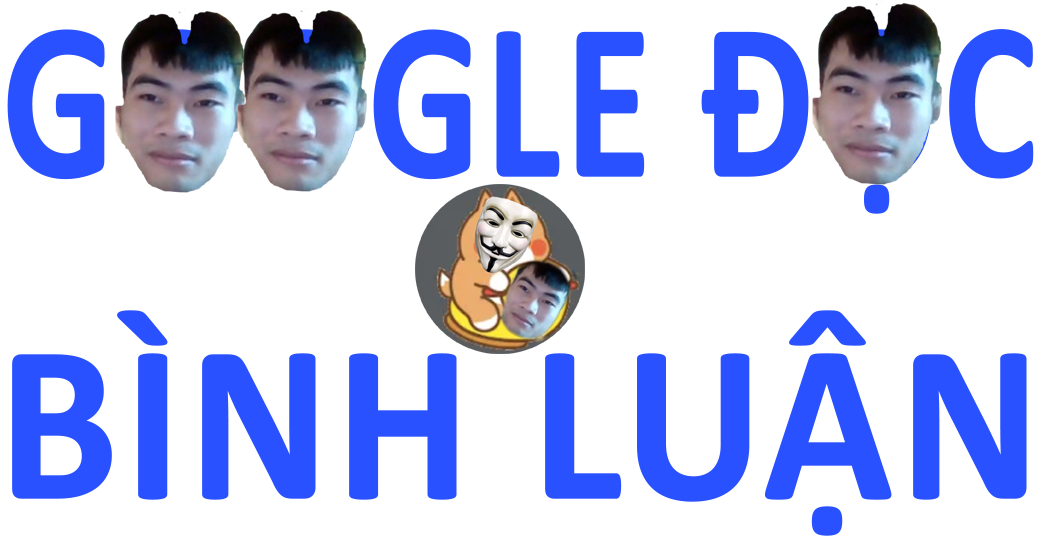
<style>
.page{position:relative;width:1039px;height:538px;background:#ffffff}
.page>*{position:absolute;margin:0}
.t1{font:227.5px "Calibri-Bold";color:#2951ff;text-transform:uppercase;font-weight:bold;scale:0.78 1}
.t2{font:227.3px "Calibri-Bold";color:#2951ff;text-transform:uppercase;font-weight:bold;scale:0.95 1}
</style>
<div class="page">
<p class="t1" style="left:7px;top:29px;width:1027px;height:185px">GOOGLE ĐỌC</p>
<p class="t2" style="left:12px;top:310px;width:1015px;height:226px">Bình luận</p>
</div>
